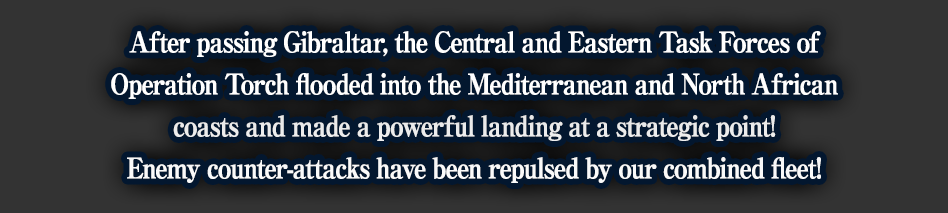
<style>
.page{position:relative;width:948px;height:213px;background:#333333}
.page>*{position:absolute;margin:0}
.t1{font:28px/42px "RyuminPro-ExBold";letter-spacing:-0.08em;color:#ffffff;font-weight:bold;scale:0.9 1}
</style>
<div class="page">
<p class="t1" style="left:111px;top:31px;width:727px;height:152px;text-align:center">After passing Gibraltar, the Central and Eastern Task Forces of<br>Operation Torch flooded into the Mediterranean and North African<br>coasts and made a powerful landing at a strategic point!<br>Enemy counter-attacks have been repulsed by our combined fleet!</p>
</div>
